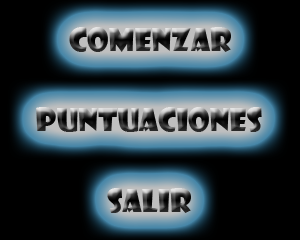
<style>
.page{position:relative;width:300px;height:240px;background:#000000}
.page>*{position:absolute;margin:0}
.t1{font:31px "ShowcardGothic-Reg"}
</style>
<div class="page">
<p class="t1" style="left:69px;top:27px;width:162px;height:25px">Comenzar</p>
<p class="t1" style="left:36px;top:107px;width:226px;height:25px">Puntuaciones</p>
<p class="t1" style="left:107px;top:188px;width:84px;height:25px">Salir</p>
</div>
